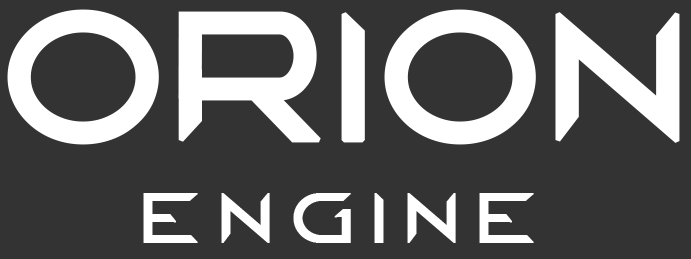
<style>
.page{position:relative;width:691px;height:259px;background:#333333}
.page>*{position:absolute;margin:0}
.t1{font:180px "Deltha-Regular";letter-spacing:0.01em;color:#ffffff;text-transform:uppercase;font-weight:bold}
.t2{font:70px "Deltha-Regular";letter-spacing:0.24em;color:#ffffff;text-transform:uppercase;font-weight:bold}
</style>
<div class="page">
<p class="t1" style="left:7px;top:9px;width:673px;height:136px">ORION</p>
<p class="t2" style="left:143px;top:193px;width:391px;height:50px">ENGINE</p>
</div>
